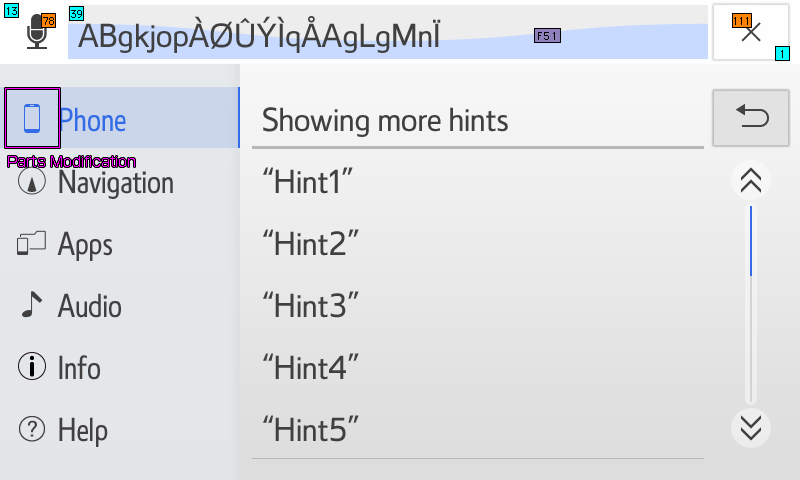
<style>
.page{position:relative;width:800px;height:480px}
.page>*{position:absolute;margin:0}
.t1{font:30px "Tfont1502_T1S";color:#404041}
.t2{font:30px "Tfont1502_T2S";color:#336ce6}
.t3{font:30px "Tfont1502_T1S";color:#404040}
.t4{font:14px "ShinGoPro-Regular";color:#ff00ff}
.t5{font:30px "Tfont1502_T2S";color:#404041}
.t6{font:30px/62px "Tfont1502_T1S";color:#404040}
</style>
<div class="page">
<p class="t1" style="left:78px;top:16px;width:363px;height:37px">ABgkjopÀØÛÝÌqÅAgLgMnÏ</p>
<p class="t2" style="left:59px;top:107px;width:67px;height:25px">Phone</p>
<p class="t3" style="left:263px;top:107px;width:245px;height:30px">Showing more hints</p>
<p class="t4" style="left:8px;top:156px;width:127px;height:11px">Parts Modification</p>
<p class="t5" style="left:59px;top:169px;width:114px;height:30px">Navigation</p>
<p class="t6" style="left:263px;top:167px;width:96px;height:275px">“Hint1”<br>“Hint2”<br>“Hint3”<br>“Hint4”<br>“Hint5”</p>
<p class="t5" style="left:57px;top:231px;width:55px;height:30px">Apps</p>
<p class="t5" style="left:57px;top:293px;width:64px;height:25px">Audio</p>
<p class="t5" style="left:59px;top:355px;width:41px;height:25px">Info</p>
<p class="t5" style="left:59px;top:417px;width:49px;height:30px">Help</p>
</div>
